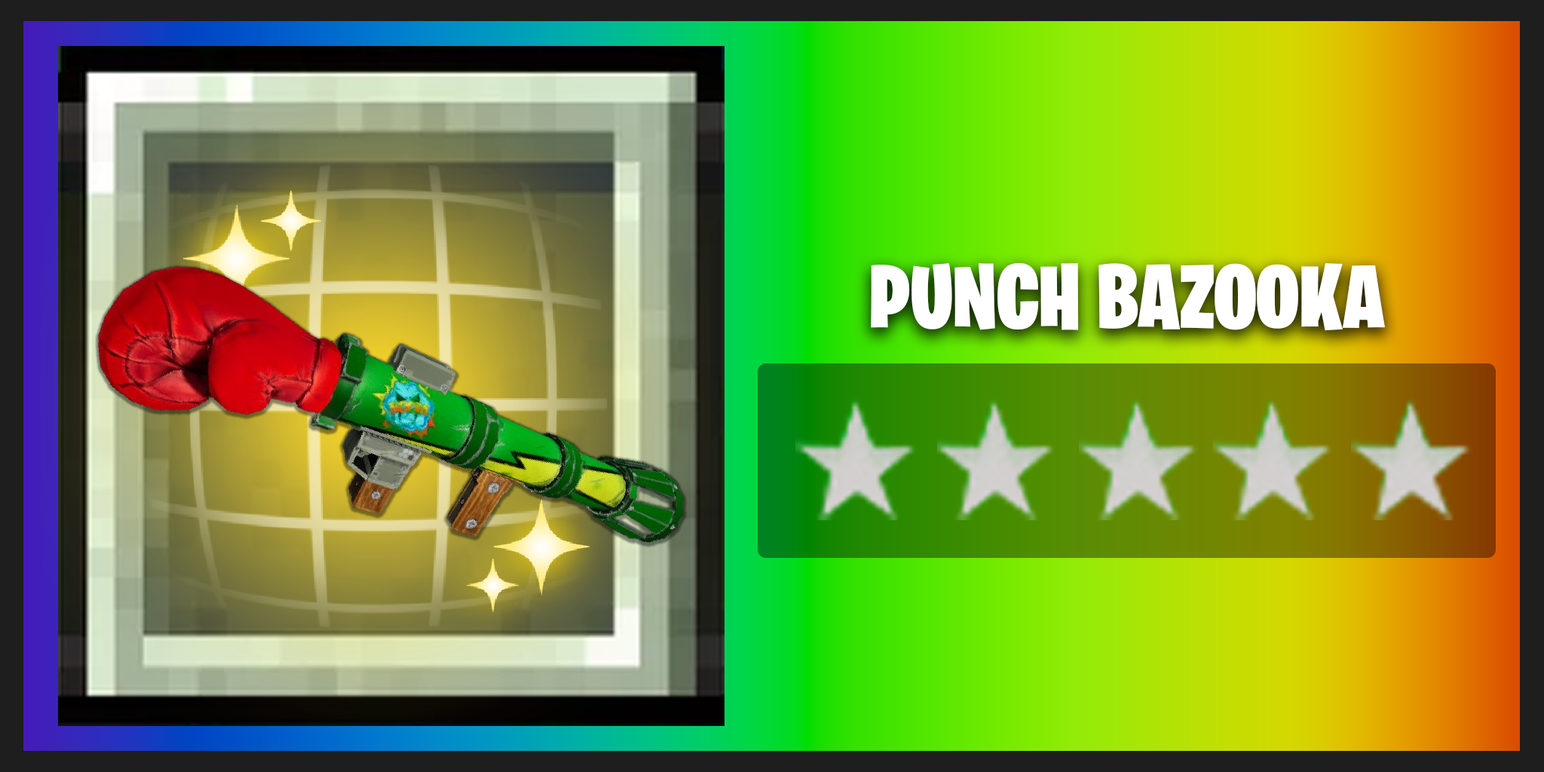
<style>
.page{position:relative;width:1544px;height:772px}
.page>*{position:absolute;margin:0}
.t1{font:90.5px "BurbankBigCondensed-Black";color:#ffffff}
</style>
<div class="page">
<p class="t1" style="left:871px;top:262px;width:514px;height:69px">PUNCH BAZOOKA</p>
</div>
